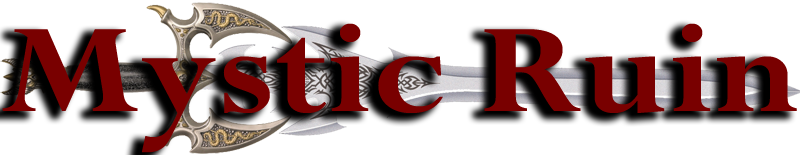
<style>
.page{position:relative;width:800px;height:155px;background:#ffffff}
.page>*{position:absolute;margin:0}
.t1{font:139.8px "Perpetua-Bold";color:#790000;scale:1.11 1}
</style>
<div class="page">
<p class="t1" style="left:2px;top:23px;width:795px;height:130px">Mystic Ruin</p>
</div>
